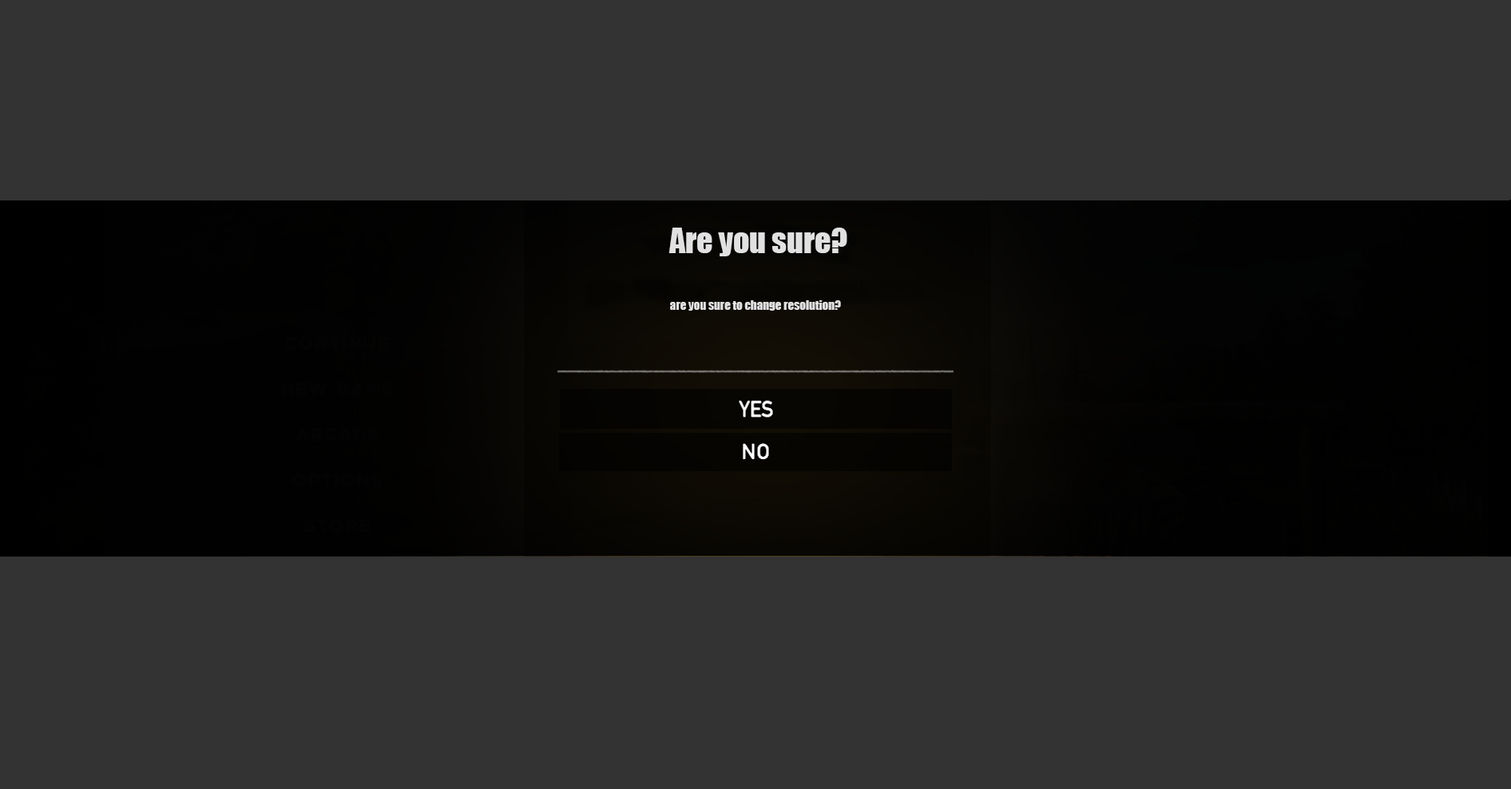
<style>
.page{position:relative;width:1511px;height:789px;background:#333333}
.page>*{position:absolute;margin:0}
.t1{font:31.9px "Impact";color:#e1e1e1}
.t2{font:12px "Impact";color:#e1e1e1}
</style>
<div class="page">
<p class="t1" style="left:669px;top:228px;width:178px;height:28px">Are you sure?</p>
<p class="t2" style="left:670px;top:300px;width:171px;height:11px">are you sure to change resolution?</p>
</div>
